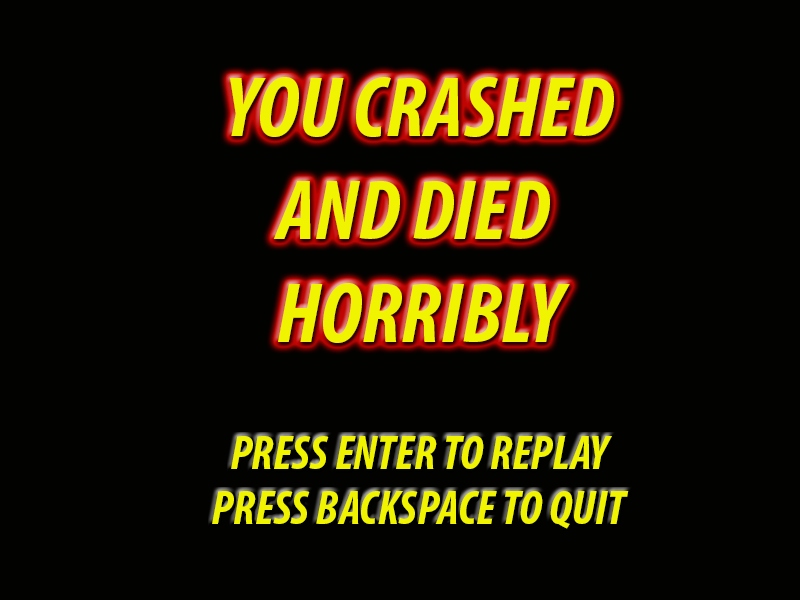
<style>
.page{position:relative;width:800px;height:600px;background:#020200}
.page>*{position:absolute;margin:0}
.t1{font:86px "MyriadPro-BoldCondIt";color:#f1f400}
.t2{font:48px "MyriadPro-BoldCondIt";color:#f1f400}
</style>
<div class="page">
<p class="t1" style="left:230px;top:77px;width:384px;height:266px;text-align:center">YOU CRASHED<br>AND DIED <br>HORRIBLY</p>
<p class="t2" style="left:231px;top:436px;width:381px;height:33px">PRESS ENTER TO REPLAY</p>
<p class="t2" style="left:212px;top:491px;width:417px;height:38px">PRESS BACKSPACE TO QUIT</p>
</div>
